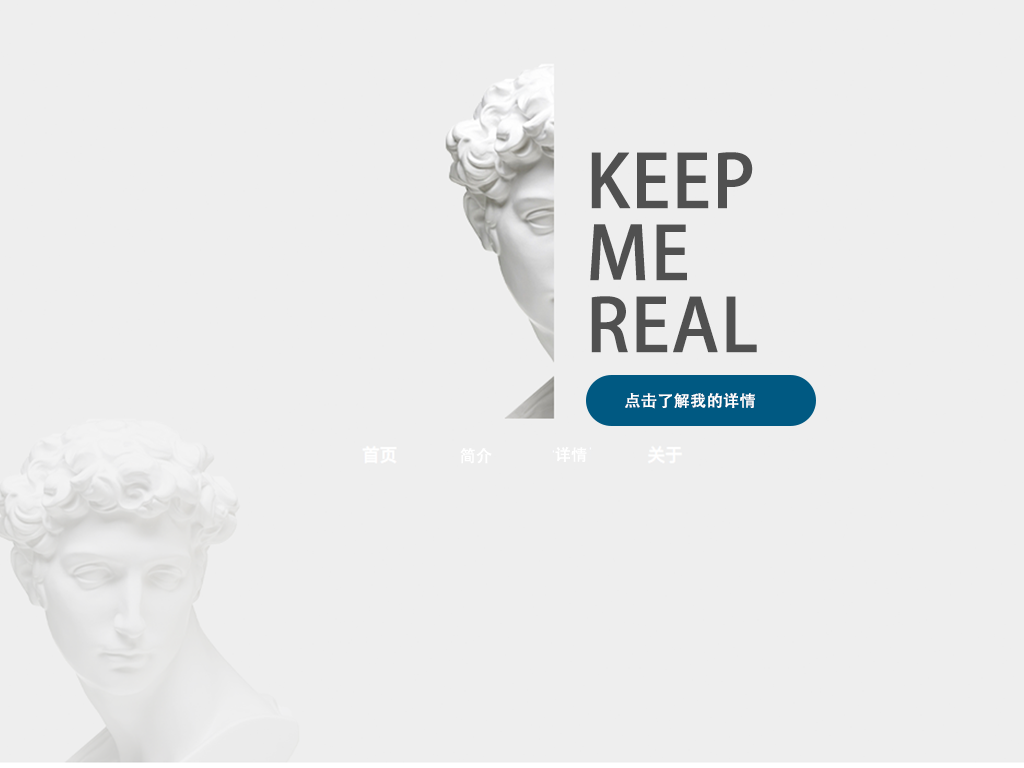
<style>
.page{position:relative;width:1024px;height:768px;background:#eeeeee}
.page>*{position:absolute;margin:0}
.t1{font:72px/72px "AdobeHeitiStd-Regular";color:#505050;font-weight:bold}
.t2{font:16px "AdobeHeitiStd-Regular";color:#ffffff;font-weight:bold}
</style>
<div class="page">
<p class="t1" style="left:590px;top:152px;width:167px;height:201px">KEEP<br>ME<br>REAL</p>
<p class="t2" style="left:625px;top:393px;width:130px;height:16px">点击了解我的详情</p>
<p class="t2" style="left:460px;top:448px;width:32px;height:16px">简介</p>
<p class="t2" style="left:555px;top:447px;width:32px;height:15px">详情</p>
</div>
